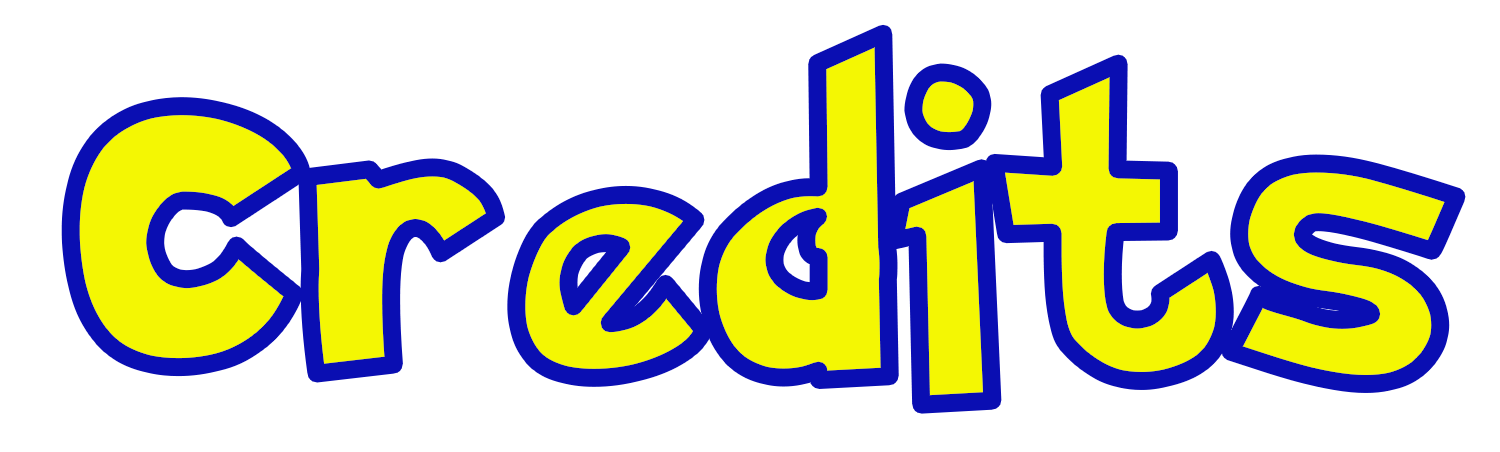
<style>
.page{position:relative;width:1500px;height:452px;background:#ffffff}
.page>*{position:absolute;margin:0}
.t1{font:322.9px "PokemonSolidNormal";letter-spacing:0.1em;color:#f4f703}
</style>
<div class="page">
<p class="t1" style="left:70px;top:33px;width:1387px;height:372px">Credits</p>
</div>
